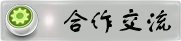
<style>
.page{position:relative;width:181px;height:41px;background:#bdbfbc}
.page>*{position:absolute;margin:0}
.t1{font:28px "FZSTK--GBK1-0";color:#000000}
</style>
<div class="page">
<p class="t1" style="left:64px;top:9px;width:107px;height:25px">合作交流</p>
</div>
